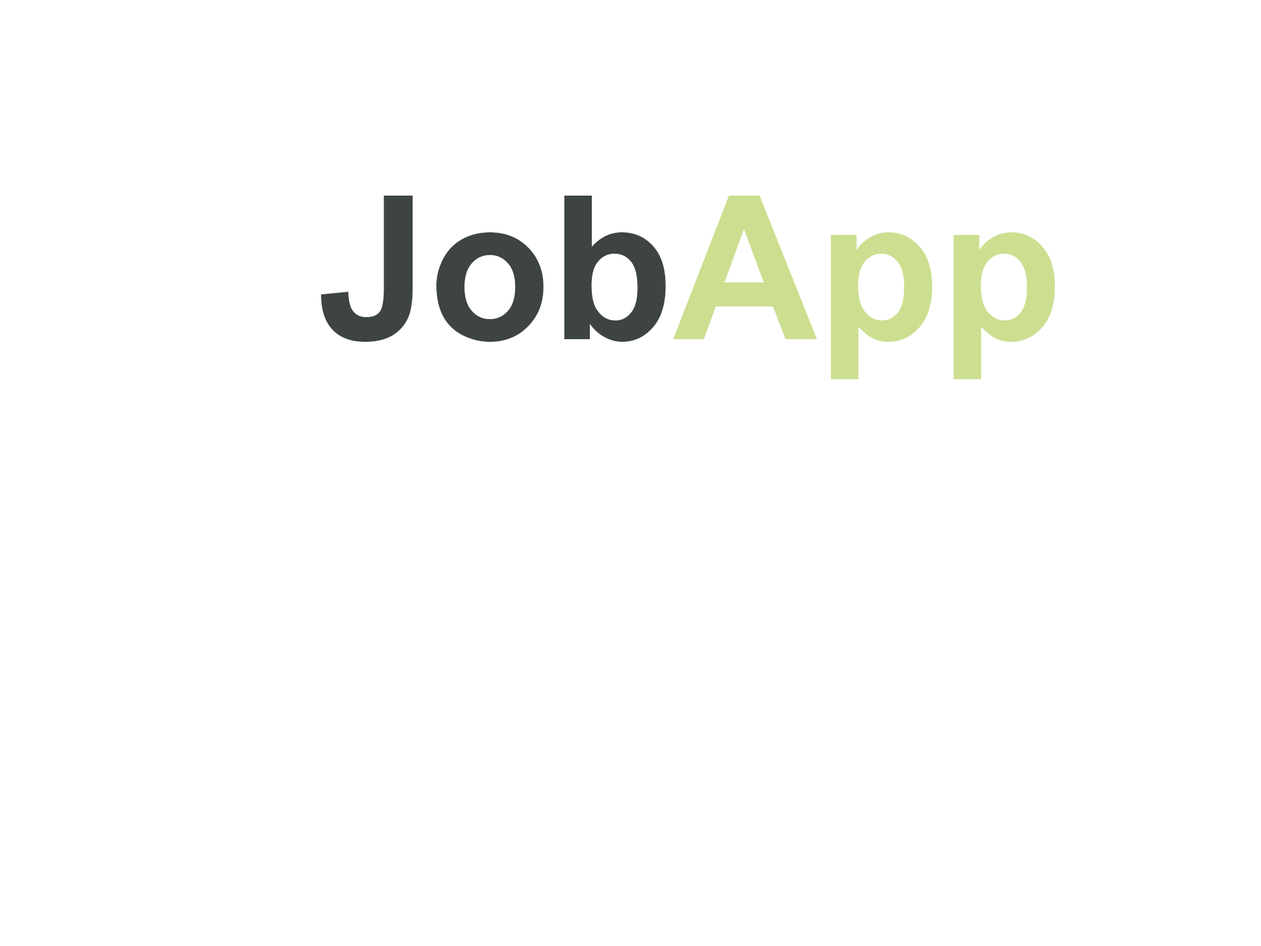
<style>
.page{position:relative;width:1261px;height:946px;background:#ffffff}
.page>*{position:absolute;margin:0}
.t1{font:200.2px "Arial-BoldMT";color:#3d4441}
.t2{font:200.2px "Arial-BoldMT";color:#ccdf90}
</style>
<div class="page">
<p class="t1" style="left:321px;top:196px;width:735px;height:183px">Job<span class="t2">App</span></p>
</div>
